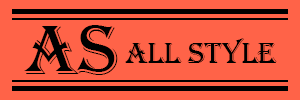
<style>
.page{position:relative;width:300px;height:100px;background:#ff6348}
.page>*{position:absolute;margin:0}
.t1{font:72px "Algerian";color:#010101}
.t2{font:30px "Algerian";color:#000000}
</style>
<div class="page">
<p class="t1" style="left:24px;top:25px;width:94px;height:50px">AS</p>
<p class="t2" style="left:125px;top:38px;width:152px;height:25px">All Style</p>
</div>
